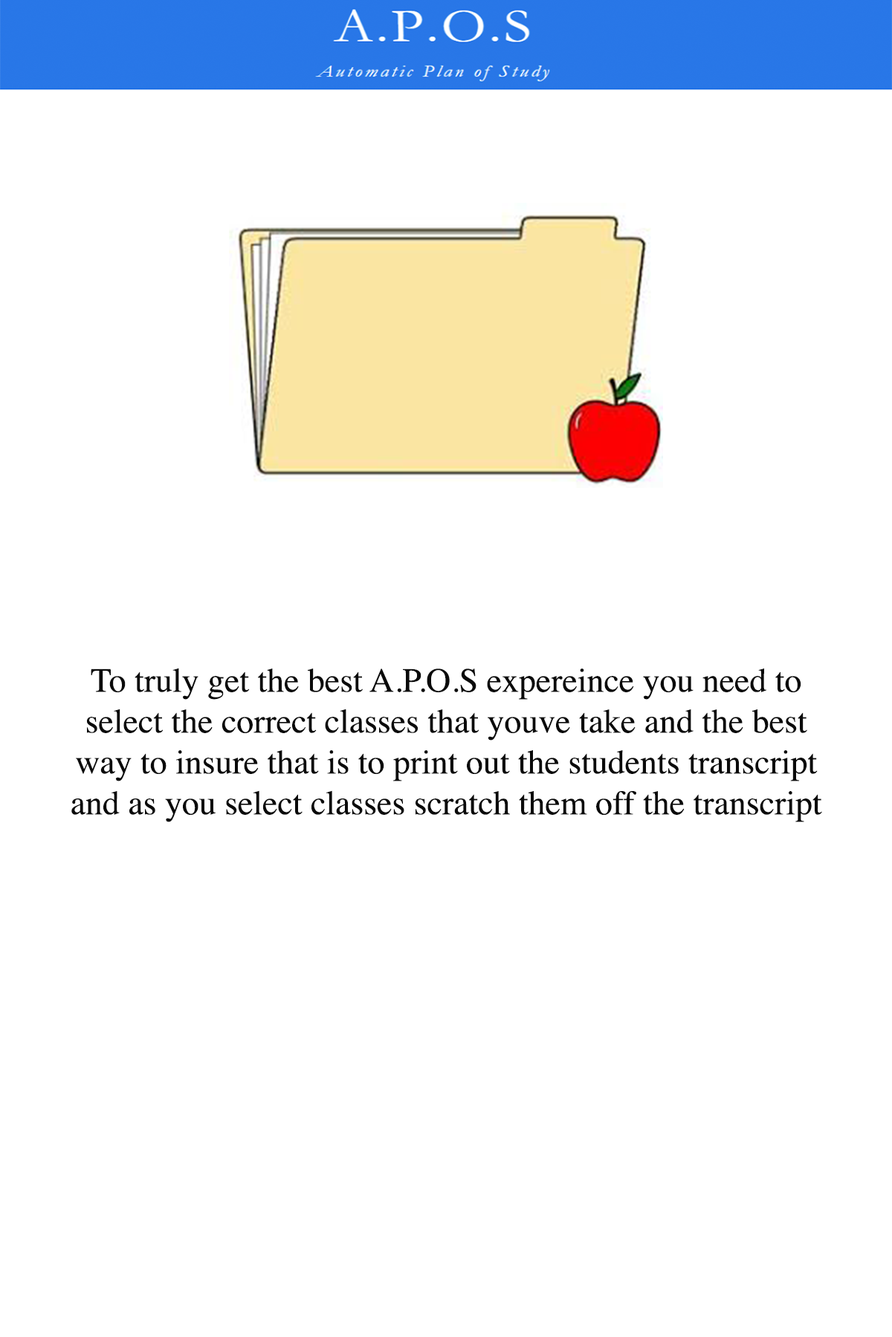
<style>
.page{position:relative;width:892px;height:1337px;background:#ffffff}
.page>*{position:absolute;margin:0}
.t1{font:34.1px "Times-Roman";color:#0a0a0a}
</style>
<div class="page">
<p class="t1" style="left:71px;top:668px;width:751px;height:155px;text-align:center">To truly get the best A.P.O.S expereince you need to select the correct classes that youve take and the best way to insure that is to print out the students transcript and as you select classes scratch them off the transcript</p>
</div>
